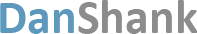
<style>
.page{position:relative;width:197px;height:34px;background:#ffffff}
.page>*{position:absolute;margin:0}
.t1{font:48px "Calibri-Bold";color:#8c8c8c}
.t2{font:48px "Calibri-Bold";color:#5c99bc}
</style>
<div class="page">
<p class="t1" style="left:0px;top:0px;width:197px;height:34px"><span class="t2">Dan</span>Shank</p>
</div>
